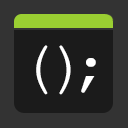
<style>
.page{position:relative;width:128px;height:128px;background:#1b1b1b}
.page>*{position:absolute;margin:0}
.t1{font:66px "CourierNewPSMT";letter-spacing:-0.09em;color:#ffffff}
.t2{font:66px "CourierNewPSMT";letter-spacing:-0.29em;color:#ffffff}
.t3{font:66px "CourierNewPSMT";letter-spacing:-0.35em;color:#ffffff}
</style>
<div class="page">
<p class="t1" style="left:36px;top:45px;width:60px;height:50px">(<span class="t2">)</span><span class="t3">;</span></p>
</div>
